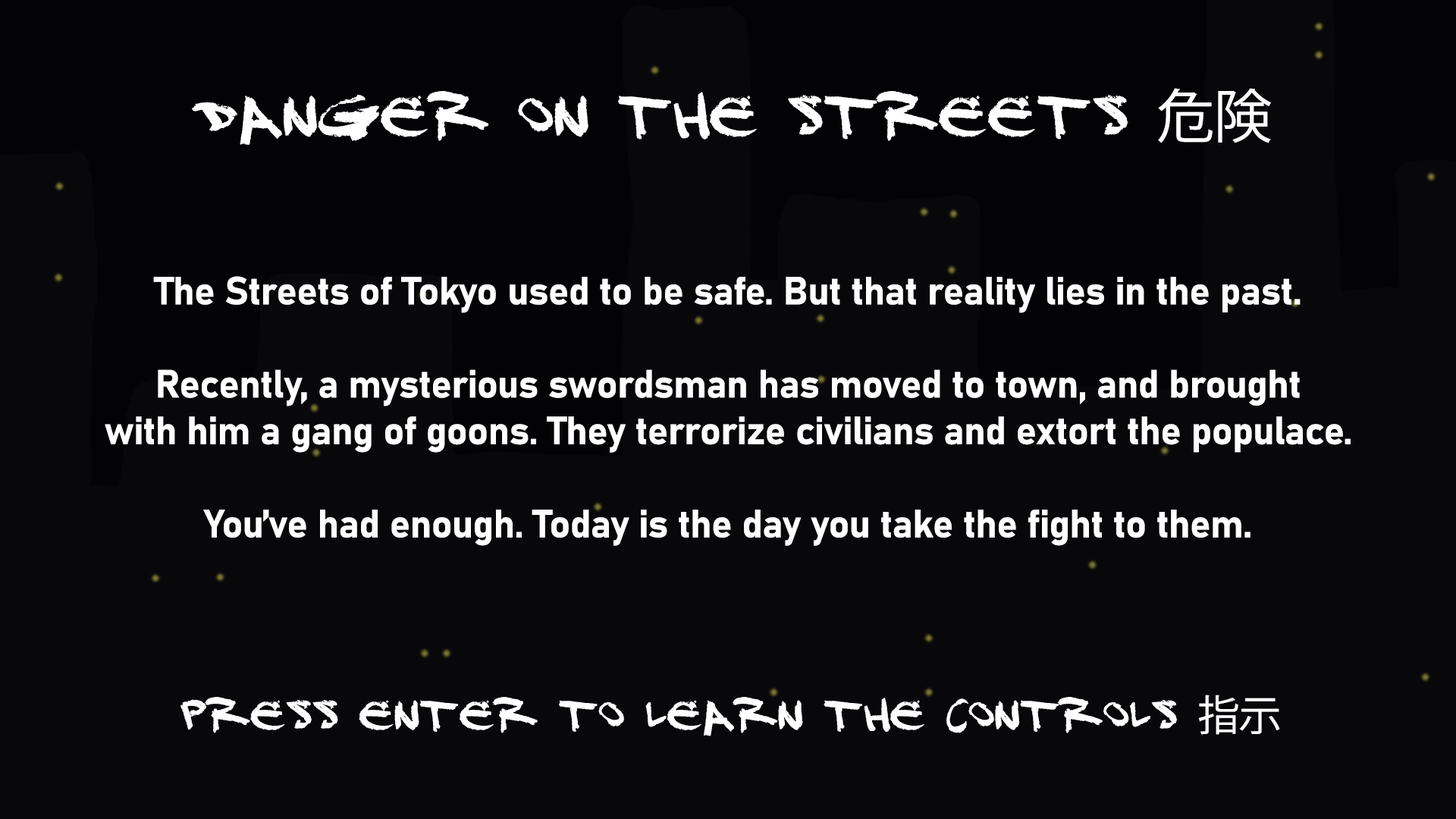
<style>
.page{position:relative;width:1456px;height:819px;background:#08070a}
.page>*{position:absolute;margin:0}
.t1{font:58px "DJ-Gross";letter-spacing:-0.01em;color:#ffffff}
.t2{font:58px "KozGoPr6N-Regular";letter-spacing:-0.01em;color:#ffffff}
.t3{font:38.8px "Bahnschrift-Bold";letter-spacing:-0.01em;color:#ffffff}
.t4{font:41.8px "DJ-Gross";letter-spacing:-0.01em;color:#ffffff}
.t5{font:41.8px "KozGoPr6N-Regular";letter-spacing:-0.01em;color:#ffffff}
</style>
<div class="page">
<p class="t1" style="left:192px;top:88px;width:1079px;height:57px">Danger on the Streets <span class="t2">危険</span></p>
<p class="t3" style="left:105px;top:276px;width:1246px;height:270px;text-align:center">The Streets of Tokyo used to be safe. But that reality lies in the past.<br><br>Recently, a mysterious swordsman has moved to town, and brought<br>with him a gang of goons. They terrorize civilians and extort the populace.<br><br>You’ve had enough. Today is the day you take the fight to them.</p>
<p class="t4" style="left:180px;top:695px;width:1100px;height:41px">PRESS ENTER TO Learn the Controls <span class="t5">指示</span></p>
</div>
